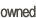
<style>
.page{position:relative;width:36px;height:18px;background:#ffffff}
.page>*{position:absolute;margin:0}
.t1{font:14px "GothicMB101Pro-Regular";letter-spacing:-0.08em;color:#4c4842;font-weight:bold;scale:0.8 1}
</style>
<div class="page">
<p class="t1" style="left:0px;top:5px;width:36px;height:13px">owned</p>
</div>
